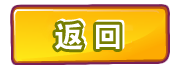
<style>
.page{position:relative;width:186px;height:70px;background:#ffffff}
.page>*{position:absolute;margin:0}
.t1{font:30px "Jdahei";letter-spacing:0.3em;color:#ffffff}
</style>
<div class="page">
<p class="t1" style="left:55px;top:23px;width:65px;height:27px">返回</p>
</div>
